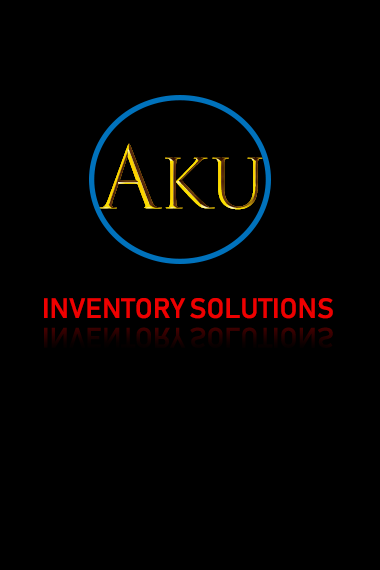
<style>
.page{position:relative;width:380px;height:570px;background:#000000}
.page>*{position:absolute;margin:0}
.t1{font:66.7px "TrajanColor-Concept"}
.t2{font:83.3px "TrajanColor-Concept"}
.t3{font:27.8px "Bahnschrift_531wght";color:#ee0000}
</style>
<div class="page">
<p class="t1" style="left:98px;top:143px;width:165px;height:67px"><span class="t2">A</span>ku</p>
<p class="t3" style="left:44px;top:298px;width:289px;height:21px">INVENTORY SOLUTIONS</p>
</div>
